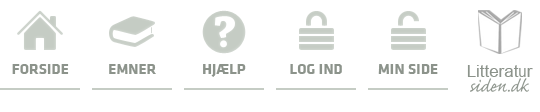
<style>
.page{position:relative;width:540px;height:112px;background:#ffffff}
.page>*{position:absolute;margin:0}
.t1{font:14.6px "KlavikaBold-Bold";letter-spacing:0.025em;color:#8c938b}
.t2{font:16.9px "ArialMT";color:#8c938b}
.t3{font:16.9px "ArialMT";color:#8c938b;scale:0.9 1}
.t4{font:22px "CaflischScriptPro-Regular";color:#8c938b}
</style>
<div class="page">
<p class="t1" style="left:12px;top:64px;width:57px;height:10px">FORSIDE</p>
<p class="t1" style="left:109px;top:64px;width:47px;height:10px">EMNER</p>
<p class="t1" style="left:203px;top:64px;width:43px;height:13px">HJÆLP</p>
<p class="t1" style="left:290px;top:64px;width:52px;height:10px">LOG IND</p>
<p class="t1" style="left:378px;top:64px;width:60px;height:10px">MIN SIDE</p>
<p class="t2" style="left:467px;top:65px;width:66px;height:12px">Litterat<span class="t3">u</span>r</p>
<p class="t4" style="left:470px;top:78px;width:59px;height:14px">siden.dk</p>
</div>
